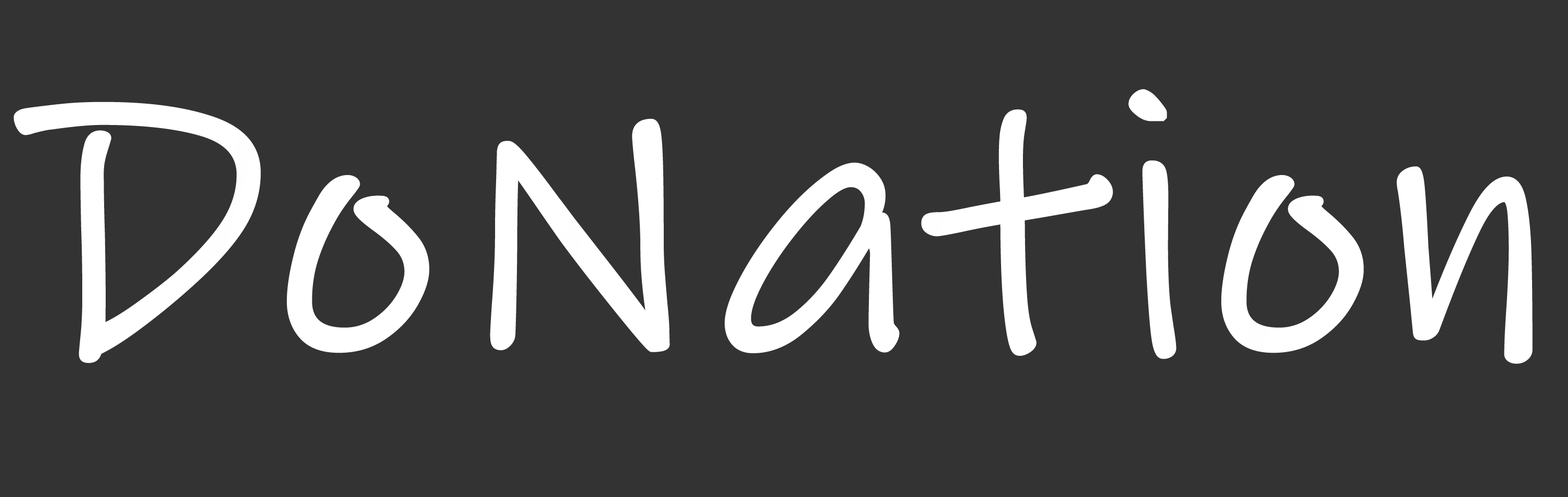
<style>
.page{position:relative;width:1568px;height:497px;background:#333333}
.page>*{position:absolute;margin:0}
.t1{font:374.6px "InkFree";color:#fefefe;font-weight:bold}
</style>
<div class="page">
<p class="t1" style="left:14px;top:89px;width:1519px;height:275px">DoNation</p>
</div>
